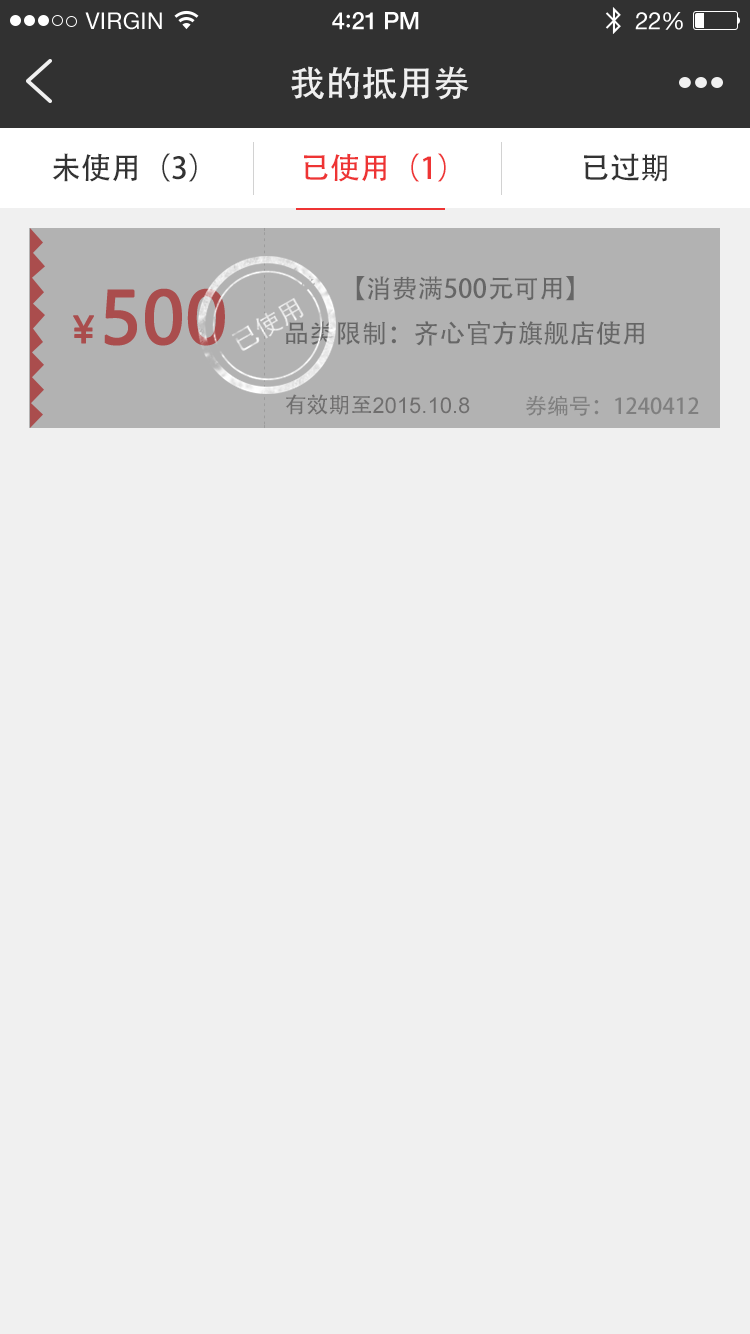
<style>
.page{position:relative;width:750px;height:1334px;background:#f0f0f0}
.page>*{position:absolute;margin:0}
.t1{font:36px "AdobeHeitiStd-Regular";color:#f0f0f0}
.t2{font:30px "AdobeHeitiStd-Regular";color:#333333}
.t3{font:30px "AdobeHeitiStd-Regular";color:#ee3434}
.t4{font:26px "AdobeHeitiStd-Regular";color:#666666}
.t5{font:70px "MicrosoftYaHei";color:#aa4d4d;font-weight:bold}
.t6{font:36px "MicrosoftYaHei";color:#aa4d4d;font-weight:bold}
.t7{font:22px "ArialMT";color:#797777}
.t8{font:22px "AdobeHeitiStd-Regular";color:#797777}
.t9{font:22px "AdobeHeitiStd-Regular";color:#7f7f7f}
</style>
<div class="page">
<p class="t1" style="left:291px;top:66px;width:178px;height:34px">我的抵用券</p>
<p class="t2" style="left:52px;top:153px;width:145px;height:29px">未使用（3）</p>
<p class="t3" style="left:304px;top:153px;width:142px;height:29px">已使用（1）</p>
<p class="t2" style="left:584px;top:153px;width:83px;height:29px">已过期</p>
<p class="t4" style="left:286px;top:276px;width:358px;height:70px;text-align:center">【消费满500元可用】<br>品类限制：齐心官方旗舰店使用</p>
<p class="t5" style="left:104px;top:288px;width:121px;height:58px">500</p>
<p class="t6" style="left:73px;top:315px;width:21px;height:29px">￥</p>
<p class="t7" style="left:285px;top:394px;width:185px;height:21px"><span class="t8">有效期至</span>2015.10.8</p>
<p class="t9" style="left:525px;top:395px;width:174px;height:21px">券编号：1240412</p>
</div>
